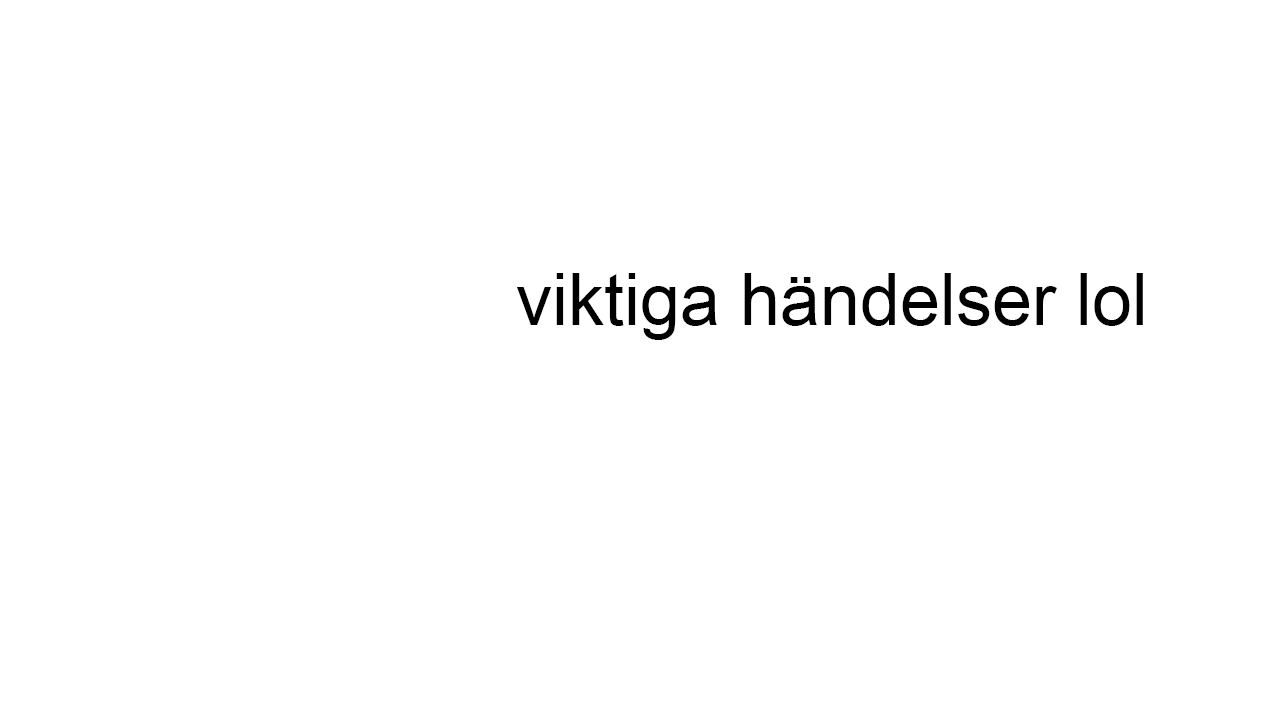
<style>
.page{position:relative;width:1280px;height:720px;background:#ffffff}
.page>*{position:absolute;margin:0}
.t1{font:72px "ArialMT";color:#000000}
</style>
<div class="page">
<p class="t1" style="left:517px;top:273px;width:626px;height:67px">viktiga händelser lol</p>
</div>
